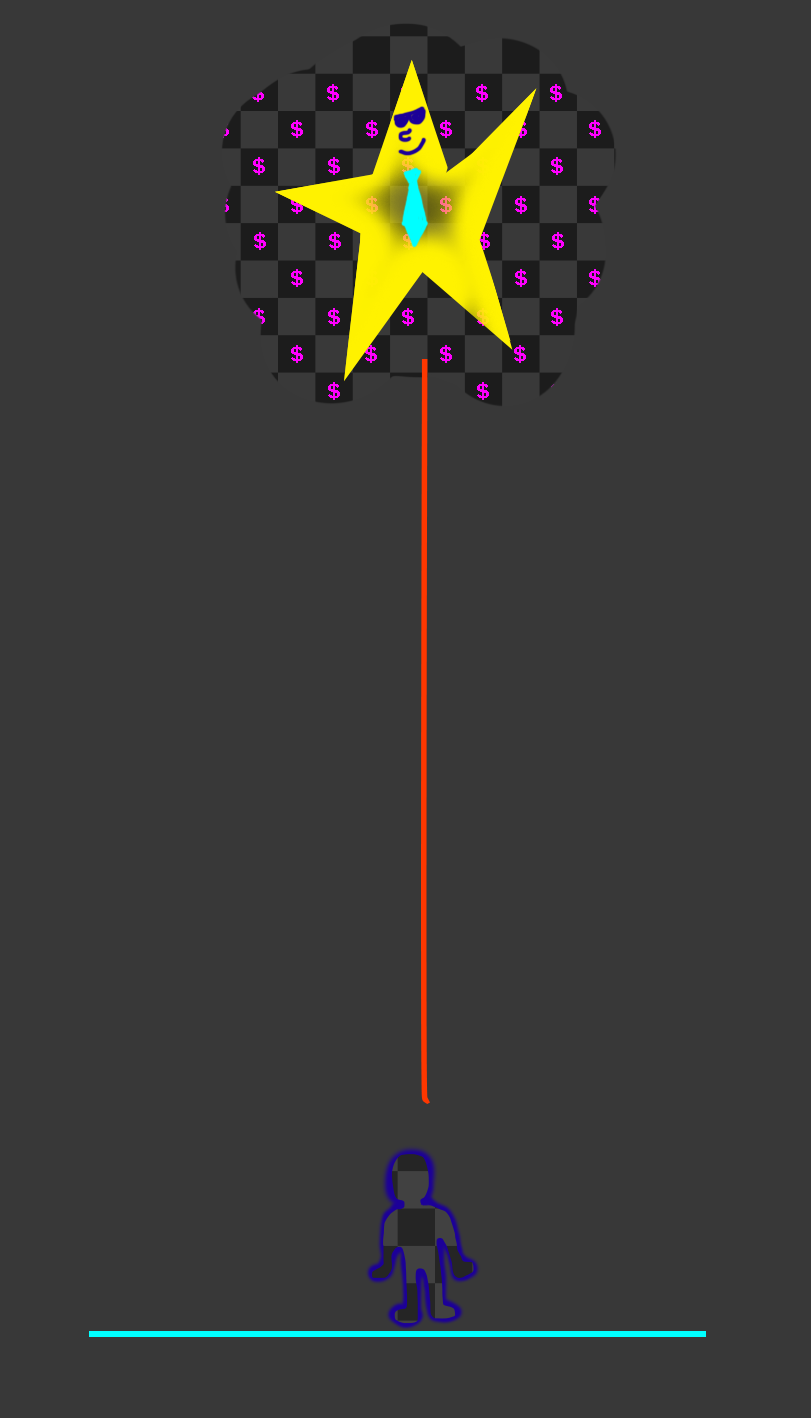
<style>
.page{position:relative;width:811px;height:1418px;background:#383838}
.page>*{position:absolute;margin:0}
.t1{font:20px "BentonSans-Bold";letter-spacing:0.005em}
.t2{font:20px "BentonSans-Bold";letter-spacing:0.005em;color:#ff00ff}
</style>
<div class="page">
<p class="t1" style="left:178px;top:84px;width:384px;height:18px">$           $           $           $           $           $</p>
<p class="t2" style="left:217px;top:120px;width:384px;height:18px">$           $           $           $           $           $</p>
<p class="t1" style="left:179px;top:157px;width:384px;height:18px">$           $           $           $           $           $</p>
<p class="t1" style="left:217px;top:196px;width:384px;height:18px">$           $           $           $           $           $</p>
<p class="t2" style="left:180px;top:232px;width:384px;height:18px">$           $           $           $           $           $</p>
<p class="t1" style="left:217px;top:269px;width:384px;height:18px">$           $           $           $           $           $</p>
<p class="t2" style="left:179px;top:308px;width:384px;height:18px">$           $           $           $           $           $</p>
<p class="t2" style="left:142px;top:345px;width:384px;height:18px">$           $           $           $           $           $</p>
<p class="t1" style="left:179px;top:382px;width:384px;height:18px">$           $           $           $           $           $</p>
</div>
